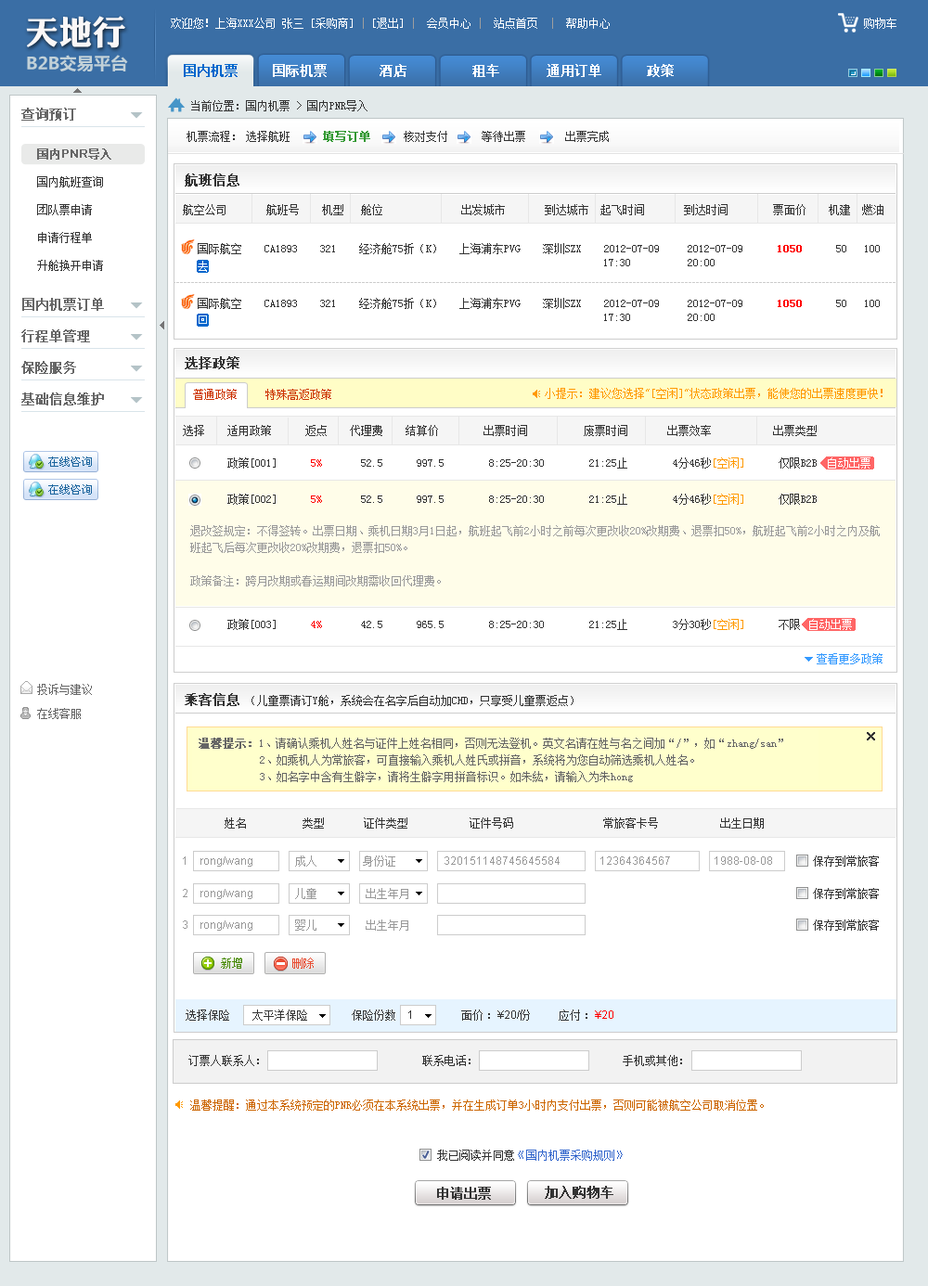
<style>
.page{position:relative;width:928px;height:1286px;background:#ffffff}
.page>*{position:absolute;margin:0}
.t1{font:33.6px "DFPLiJinHeiW8";color:#faf7f7}
.t2{font:11.1px "SimSun";color:#ffffff}
.t3{font:11.1px "SimSun";color:#9e9e9e}
.t4{font:17px "MicrosoftYaHei-Bold";color:#c2d1d8}
.t5{font:13px "SimSun";color:#ffffff;font-weight:bold}
.t6{font:13px "SimSun";color:#0066cc;font-weight:bold}
.t7{font:11.1px "SimSun";color:#333333}
.t8{font:13px "SimSun";color:#666666;font-weight:bold}
.t9{font:11.1px "SimSun";color:#339933;font-weight:bold}
.t10{font:11.1px "ArialMT";color:#666666;font-weight:bold}
.t11{font:11.1px "SimSun";color:#666666;font-weight:bold}
.t12{font:13px "SimSun";color:#333333;font-weight:bold}
.t13{font:11.1px/27.8px "SimSun";color:#333333}
.t14{font:11.1px "SimSun";color:#ff0000;font-weight:bold}
.t15{font:11.1px "SimSun";color:#cc3300}
.t16{font:11.1px "SimSun";color:#ff9900}
.t17{font:11.1px "SimSun";color:#ff0000}
.t18{font:11.1px/16.7px "SimSun";color:#999999}
.t19{font:11.1px "SimSun";color:#3399ff}
.t20{font:11.1px/24.1px "SimSun";color:#666666}
.t21{font:11.1px/16.7px "SimSun";color:#666666}
.t22{font:11.1px/16.7px "SimSun";color:#666666;font-weight:bold}
.t23{font:11.1px "ArialMT";color:#999999}
.t24{font:11.1px "SimSun";color:#999999}
.t25{font:11.1px "SimSun";color:#468900}
.t26{font:11.1px "SimSun";color:#e84c31}
.t27{font:11.1px "ArialMT";color:#333333}
.t28{font:11.1px "ArialMT";color:#ff0000}
.t29{font:11.1px "SimSun";color:#cc6600}
.t30{font:11.1px "SimSun";color:#3366cc}
</style>
<div class="page">
<p class="t1" style="left:26px;top:16px;width:99px;height:32px">天地行</p>
<p class="t2" style="left:171px;top:18px;width:438px;height:11px">欢迎您！上海XXX公司 张三 [采购商]<span class="t3"> | </span>[退出] <span class="t3">|</span>  会员中心 <span class="t3">|</span>  站点首页  <span class="t3">|</span>  帮助中心</p>
<p class="t2" style="left:864px;top:18px;width:32px;height:11px">购物车</p>
<p class="t4" style="left:27px;top:55px;width:101px;height:17px">B2B交易平台</p>
<p class="t5" style="left:184px;top:64px;width:489px;height:13px"><span class="t6">国内机票</span>    国际机票     酒店     租车     通用订单      政策</p>
<p class="t7" style="left:191px;top:100px;width:176px;height:11px">当前位置：国内机票 &gt; 国内PNR导入</p>
<p class="t8" style="left:21px;top:108px;width:55px;height:13px">查询预订</p>
<p class="t7" style="left:186px;top:131px;width:49px;height:11px">机票流程：</p>
<p class="t7" style="left:246px;top:131px;width:362px;height:11px">选择航班<span class="t9">     填写订单     </span>核对支付      等待出票       出票完成</p>
<p class="t10" style="left:37px;top:148px;width:74px;height:12px"><span class="t11">国内</span>PNR<span class="t11">导入</span></p>
<p class="t12" style="left:185px;top:173px;width:54px;height:13px">航班信息</p>
<p class="t13" style="left:37px;top:176px;width:66px;height:95px">国内航班查询<br>团队票申请<br>申请行程单<br>升舱换开申请</p>
<p class="t7" style="left:183px;top:204px;width:700px;height:11px">航空公司      航班号    机型   舱位              出发城市       到达城市  起飞时间   到达时间       票面价    机建  燃油</p>
<p class="t7" style="left:198px;top:243px;width:681px;height:11px">国际航空    CA1893    321    经济舱75折（K）   上海浦东PVG    深圳SZX    2012-07-09     2012-07-09      <span class="t14">1050</span>      50   100</p>
<p class="t7" style="left:604px;top:259px;width:26px;height:7px">17:30</p>
<p class="t7" style="left:687px;top:259px;width:27px;height:7px">20:00</p>
<p class="t8" style="left:22px;top:298px;width:82px;height:13px">国内机票订单</p>
<p class="t7" style="left:198px;top:298px;width:681px;height:11px">国际航空    CA1893    321    经济舱75折（K）   上海浦东PVG    深圳SZX    2012-07-09     2012-07-09      <span class="t14">1050</span>      50   100</p>
<p class="t7" style="left:604px;top:314px;width:26px;height:7px">17:30</p>
<p class="t7" style="left:687px;top:314px;width:27px;height:7px">20:00</p>
<p class="t8" style="left:21px;top:329px;width:69px;height:13px">行程单管理</p>
<p class="t8" style="left:21px;top:361px;width:55px;height:13px">保险服务</p>
<p class="t12" style="left:185px;top:356px;width:54px;height:13px">选择政策</p>
<p class="t15" style="left:193px;top:389px;width:138px;height:11px">普通政策     特殊高返政策</p>
<p class="t16" style="left:544px;top:388px;width:338px;height:11px">小提示：建议您选择"[空闲]"状态政策出票，能使您的出票速度更快！</p>
<p class="t8" style="left:21px;top:392px;width:83px;height:13px">基础信息维护</p>
<p class="t7" style="left:183px;top:425px;width:633px;height:11px">选择    适用政策      返点    代理费    结算价        出票时间          废票时间       出票效率           出票类型</p>
<p class="t7" style="left:227px;top:457px;width:589px;height:11px">政策[001]      <span class="t17">5%</span>       52.5      997.5        8:25-20:30        21:25止        4分46秒<span class="t16">[空闲]</span>      仅限B2B</p>
<p class="t2" style="left:827px;top:457px;width:43px;height:11px">自动出票</p>
<p class="t7" style="left:227px;top:493px;width:589px;height:12px">政策[002]      <span class="t17">5%</span>       52.5      997.5        8:25-20:30        21:25止        4分46秒<span class="t16">[空闲]</span>      仅限B2B</p>
<p class="t18" style="left:190px;top:525px;width:689px;height:61px">退改签规定：不得签转。出票日期、乘机日期3月1日起，航班起飞前2小时之前每次更改收20%改期费、退票扣50%，航班起飞前2小时之内及航班起飞后每次更改收20%改期费，退票扣50%。<br><br>政策备注：跨月改期或春运期间改期需收回代理费。</p>
<p class="t7" style="left:227px;top:619px;width:573px;height:11px">政策[003]      <span class="t17">4%</span>       42.5      965.5        8:25-20:30        21:25止        3分30秒<span class="t16">[空闲]</span>      不限</p>
<p class="t2" style="left:809px;top:619px;width:42px;height:11px">自动出票</p>
<p class="t19" style="left:816px;top:653px;width:66px;height:11px">查看更多政策</p>
<p class="t20" style="left:37px;top:684px;width:55px;height:35px">投诉与建议 <br>在线客服</p>
<p class="t12" style="left:185px;top:693px;width:54px;height:13px">乘客信息</p>
<p class="t7" style="left:251px;top:695px;width:322px;height:11px">（儿童票请订Y舱，系统会在名字后自动加CHD，只享受儿童票返点）</p>
<p class="t21" style="left:198px;top:737px;width:585px;height:45px"><span class="t22">温馨提示：</span>1、请确认乘机人姓名与证件上姓名相同，否则无法登机。英文名请在姓与名之间加“/”，如“zhang/san”<br>      2、如乘机人为常旅客，可直接输入乘机人姓氏或拼音，系统将为您自动筛选乘机人姓名。<br>      3、如名字中含有生僻字，请将生僻字用拼音标识。如朱紘，请输入为朱hong</p>
<p class="t7" style="left:224px;top:817px;width:539px;height:11px">姓名     类型  证件类型    证件号码     常旅客卡号      出生日期</p>
<p class="t23" style="left:183px;top:855px;width:589px;height:11px">1    rong/wang               <span class="t24">成人      身份证</span>                 320151148745645584             12364364567             1988-08-08</p>
<p class="t7" style="left:813px;top:855px;width:65px;height:11px">保存到常旅客</p>
<p class="t23" style="left:183px;top:888px;width:225px;height:11px">2    rong/wang               <span class="t24">儿童       出生年月</span></p>
<p class="t7" style="left:813px;top:888px;width:65px;height:11px">保存到常旅客</p>
<p class="t23" style="left:183px;top:919px;width:225px;height:11px">3    rong/wang               <span class="t24">婴儿       出生年月</span></p>
<p class="t7" style="left:813px;top:919px;width:65px;height:11px">保存到常旅客</p>
<p class="t25" style="left:221px;top:957px;width:21px;height:11px">新增</p>
<p class="t26" style="left:292px;top:957px;width:22px;height:11px">删除</p>
<p class="t7" style="left:186px;top:1009px;width:427px;height:11px">选择保险        太平洋保险                面价 ：<span class="t27">¥20/</span>份          应付 ：<span class="t28">¥20</span></p>
<p class="t7" style="left:352px;top:1009px;width:59px;height:11px">保险份数<span class="t27">    1</span></p>
<p class="t7" style="left:188px;top:1055px;width:494px;height:11px">订票人联系人：        联系电话：       手机或其他：</p>
<p class="t29" style="left:190px;top:1099px;width:573px;height:11px">温馨提醒：通过本系统预定的PNR必须在本系统出票，并在生成订单3小时内支付出票，否则可能被航空公司取消位置。</p>
<p class="t30" style="left:437px;top:1149px;width:185px;height:11px"><span class="t7">我已阅读并同意</span>《国内机票采购规则》</p>
<p class="t12" style="left:437px;top:1186px;width:54px;height:13px">申请出票</p>
<p class="t12" style="left:544px;top:1185px;width:69px;height:13px">加入购物车</p>
</div>
